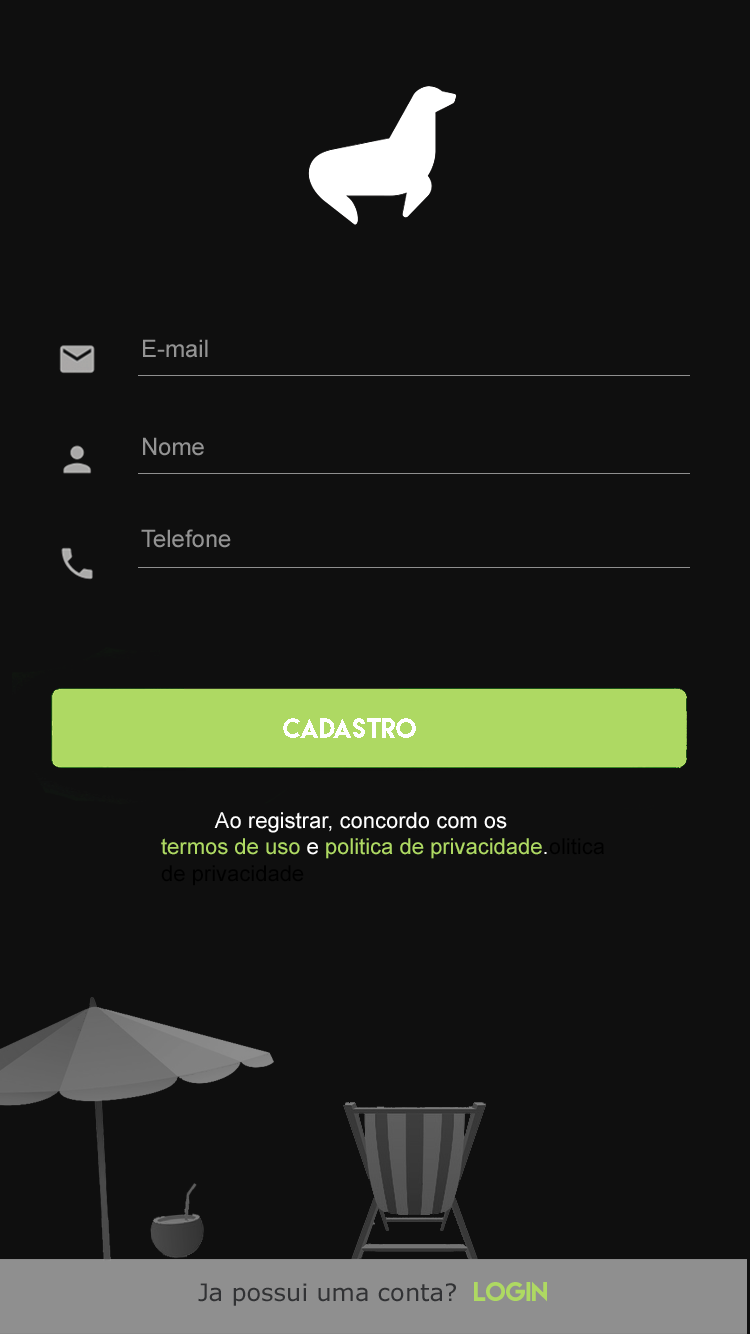
<style>
.page{position:relative;width:750px;height:1334px;background:#0f0f0f}
.page>*{position:absolute;margin:0}
.t1{font:24px "ArialMT";color:#939393}
.t2{font:25px "LemonMilk";color:#ffffff}
.t3{font:22px "ArialMT";color:#ffffff}
.t4{font:22px "ArialMT";color:#aed963}
.t5{font:22px "ArialMT";color:#000000}
.t6{font:24px "Verdana";color:#313234}
.t7{font:24px "LemonMilk";color:#aed962}
</style>
<div class="page">
<p class="t1" style="left:143px;top:339px;width:65px;height:19px">E-mail</p>
<p class="t1" style="left:143px;top:437px;width:61px;height:19px">Nome</p>
<p class="t1" style="left:141px;top:529px;width:90px;height:19px">Telefone</p>
<p class="t2" style="left:283px;top:718px;width:133px;height:20px">Cadastro</p>
<p class="t3" style="left:161px;top:812px;width:443px;height:74px">Ao registrar, concordo com os                         <span class="t4">termos de uso </span>e <span class="t4">politica de privacidade</span>.<span class="t5">olitica de privacidade</span></p>
<p class="t6" style="left:198px;top:1281px;width:349px;height:25px">Ja possui uma conta?  <span class="t7">LOGIN</span></p>
</div>
